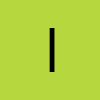
<style>
.page{position:relative;width:100px;height:100px;background:#b7d73e}
.page>*{position:absolute;margin:0}
.t1{font:62.5px "Muli-Regular";color:#000000}
</style>
<div class="page">
<p class="t1" style="left:49px;top:28px;width:6px;height:44px">I</p>
</div>
